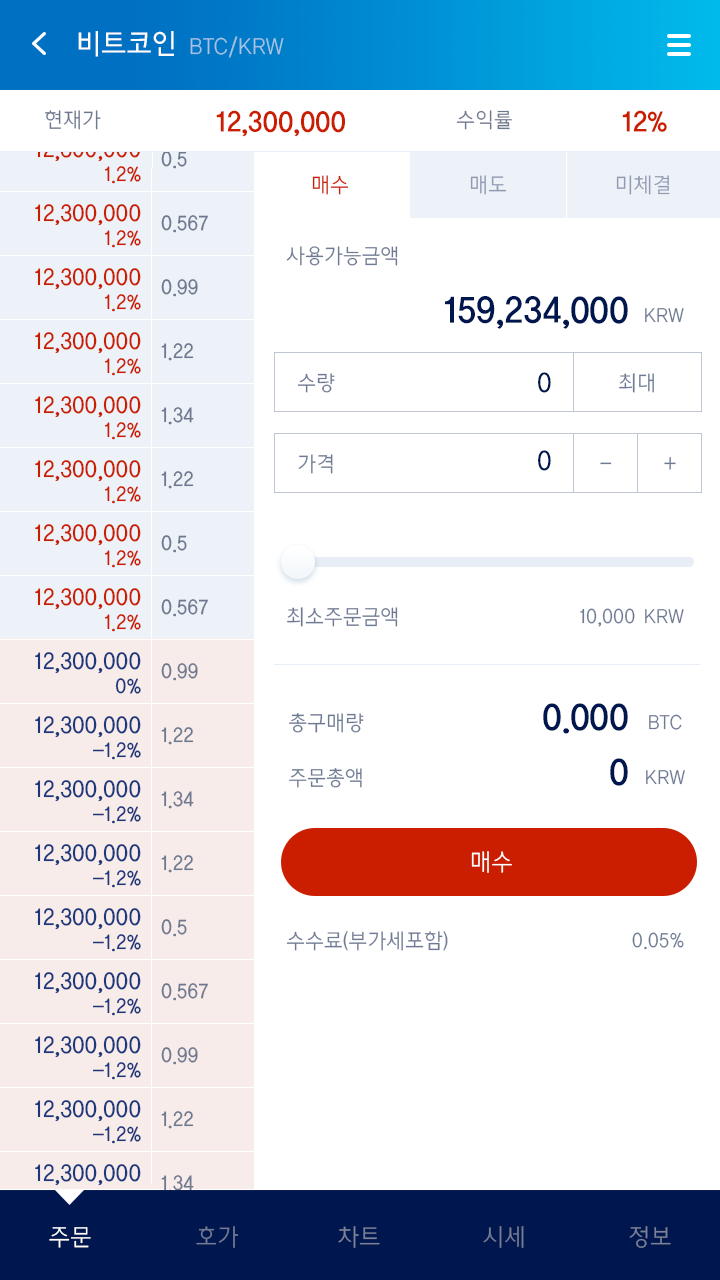
<style>
.page{position:relative;width:720px;height:1280px;background:#ffffff}
.page>*{position:absolute;margin:0}
.t1{font:28px "CreGoM";color:#ffffff}
.t2{font:24px "CreGoL";color:#a3c4e4}
.t3{font:21px "CreGoL";color:#6e788f}
.t4{font:28px "CreGoB";color:#cb1e00}
.t5{font:24px/64px "CreGoM"}
.t6{font:21px/64px "CreGoM";color:#6e788f}
.t7{font:21px/64px "CreGoM"}
.t8{font:21px "CreGoL";color:#cb1e00}
.t9{font:21px "CreGoL";color:#919ab0}
.t10{font:21px "CreGoL";color:#6f7a94}
.t11{font:36px "CreGoB";color:#00164f}
.t12{font:28px "CreGoM";color:#00164f}
.t13{font:24px "CreGoL";color:#ffffff}
.t14{font:24px "CreGoL";color:#747b92}
.t15{font:24px "CreGoL";color:#7c8197}
</style>
<div class="page">
<p class="t1" style="left:78px;top:31px;width:96px;height:26px">비트코인</p>
<p class="t2" style="left:190px;top:36px;width:94px;height:22px">BTC/KRW</p>
<p class="t3" style="left:45px;top:110px;width:56px;height:20px">현재가</p>
<p class="t4" style="left:216px;top:110px;width:129px;height:27px">12,300,000</p>
<p class="t3" style="left:456px;top:110px;width:56px;height:20px">수익률</p>
<p class="t4" style="left:622px;top:110px;width:45px;height:22px">12%</p>
<p class="t5" style="left:35px;top:140px;width:106px;height:1046px;text-align:right">12,300,000<br>12,300,000<br>12,300,000<br>12,300,000<br>12,300,000<br>12,300,000<br>12,300,000<br>12,300,000<br>12,300,000<br>12,300,000<br>12,300,000<br>12,300,000<br>12,300,000<br>12,300,000<br>12,300,000<br>12,300,000<br>12,300,000</p>
<p class="t6" style="left:161px;top:151px;width:47px;height:1106px">0.5<br>0.567<br>0.99<br>1.22<br>1.34<br>1.22<br>0.5<br>0.567<br>0.99<br>1.22<br>1.34<br>1.22<br>0.5<br>0.567<br>0.99<br>1.22<br>1.34<br>1.22</p>
<p class="t7" style="left:92px;top:166px;width:49px;height:1042px;text-align:right">1.2%<br>1.2%<br>1.2%<br>1.2%<br>1.2%<br>1.2%<br>1.2%<br>1.2%<br>0%<br>-1.2%<br>-1.2%<br>-1.2%<br>-1.2%<br>-1.2%<br>-1.2%<br>-1.2%<br>-1.2%</p>
<p class="t8" style="left:312px;top:175px;width:37px;height:20px">매수</p>
<p class="t9" style="left:470px;top:175px;width:37px;height:20px">매도</p>
<p class="t9" style="left:616px;top:175px;width:54px;height:20px">미체결</p>
<p class="t10" style="left:286px;top:246px;width:112px;height:20px">사용가능금액</p>
<p class="t11" style="left:445px;top:296px;width:183px;height:33px">159,234,000</p>
<p class="t10" style="left:645px;top:308px;width:39px;height:15px">KRW</p>
<p class="t10" style="left:297px;top:373px;width:38px;height:20px">수량</p>
<p class="t12" style="left:538px;top:372px;width:13px;height:21px">0</p>
<p class="t10" style="left:619px;top:373px;width:35px;height:20px">최대</p>
<p class="t10" style="left:298px;top:454px;width:35px;height:20px">가격</p>
<p class="t12" style="left:538px;top:450px;width:13px;height:21px">0</p>
<p class="t10" style="left:600px;top:462px;width:12px;height:3px">-</p>
<p class="t10" style="left:664px;top:457px;width:12px;height:13px">+</p>
<p class="t10" style="left:287px;top:607px;width:111px;height:20px">최소주문금액</p>
<p class="t10" style="left:580px;top:608px;width:104px;height:19px">10,000 KRW</p>
<p class="t10" style="left:289px;top:713px;width:75px;height:20px">총구매량</p>
<p class="t11" style="left:543px;top:703px;width:85px;height:31px">0.000</p>
<p class="t10" style="left:649px;top:714px;width:33px;height:16px">BTC</p>
<p class="t11" style="left:610px;top:758px;width:18px;height:28px">0</p>
<p class="t10" style="left:289px;top:768px;width:73px;height:20px">주문총액</p>
<p class="t10" style="left:646px;top:770px;width:39px;height:15px">KRW</p>
<p class="t13" style="left:471px;top:851px;width:41px;height:22px">매수</p>
<p class="t10" style="left:286px;top:931px;width:162px;height:20px">수수료(부가세포함)</p>
<p class="t10" style="left:632px;top:932px;width:52px;height:18px">0.05%</p>
<p class="t13" style="left:49px;top:1227px;width:42px;height:21px">주문</p>
<p class="t14" style="left:196px;top:1226px;width:42px;height:22px">호가</p>
<p class="t15" style="left:338px;top:1226px;width:42px;height:22px">차트</p>
<p class="t14" style="left:483px;top:1226px;width:41px;height:22px">시세</p>
<p class="t15" style="left:629px;top:1226px;width:42px;height:22px">정보</p>
</div>
